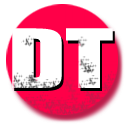
<style>
.page{position:relative;width:128px;height:128px;background:#ffffff}
.page>*{position:absolute;margin:0}
.t1{font:75.3px "Impact";color:#000000;scale:1.38 1}
</style>
<div class="page">
<p class="t1" style="left:14px;top:31px;width:101px;height:60px">DT</p>
</div>
